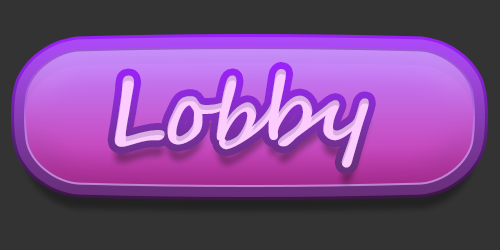
<style>
.page{position:relative;width:500px;height:250px;background:#333333}
.page>*{position:absolute;margin:0}
.t1{font:94.2px "SegoeScript-Bold";color:#fcccff;scale:0.92 1}
</style>
<div class="page">
<p class="t1" style="left:114px;top:69px;width:255px;height:99px">Lobby</p>
</div>
